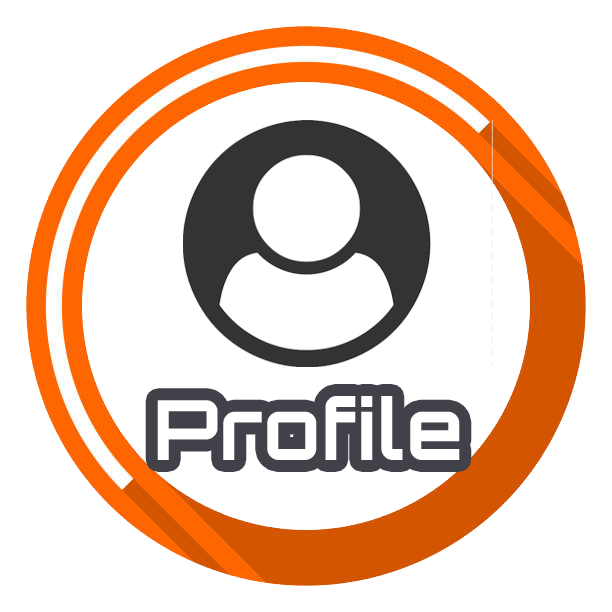
<style>
.page{position:relative;width:612px;height:612px;background:#ffffff}
.page>*{position:absolute;margin:0}
.t1{font:83.3px "Orbitron-Bold";color:#ffffff}
</style>
<div class="page">
<p class="t1" style="left:157px;top:396px;width:303px;height:64px">Profile</p>
</div>
